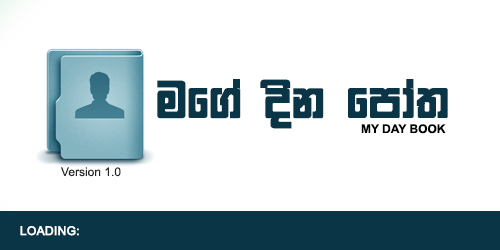
<style>
.page{position:relative;width:500px;height:250px;background:#ffffff}
.page>*{position:absolute;margin:0}
.t1{font:60px "FMGemunux";color:#093547}
.t2{font:12px "Arial-BoldMT";color:#000000}
.t3{font:12px "ArialMT";color:#252525}
.t4{font:12px "ArialMT";color:#ffffff;font-weight:bold}
</style>
<div class="page">
<p class="t1" style="left:157px;top:79px;width:291px;height:50px">uf.a osk fmda;</p>
<p class="t2" style="left:361px;top:124px;width:85px;height:10px">MY DAY BOOK</p>
<p class="t3" style="left:61px;top:167px;width:60px;height:10px">Version 1.0</p>
<p class="t4" style="left:20px;top:226px;width:59px;height:10px">LOADING:</p>
</div>
